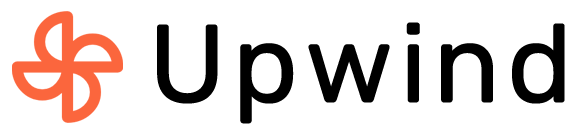
<style>
.page{position:relative;width:586px;height:134px;background:#ffffff}
.page>*{position:absolute;margin:0}
.t1{font:110px "Rubik-Regular";letter-spacing:0.035em;color:#000000;font-weight:bold}
</style>
<div class="page">
<p class="t1" style="left:157px;top:22px;width:408px;height:102px">Upwind</p>
</div>
